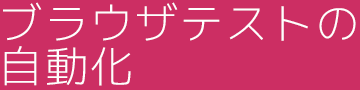
<style>
.page{position:relative;width:360px;height:90px;background:#cc2e63}
.page>*{position:absolute;margin:0}
.t1{font:43px/43px "mplus-1c-light";letter-spacing:0.05em;color:#fefefe}
</style>
<div class="page">
<p class="t1" style="left:3px;top:2px;width:353px;height:84px">ブラウザテストの<br>自動化</p>
</div>
